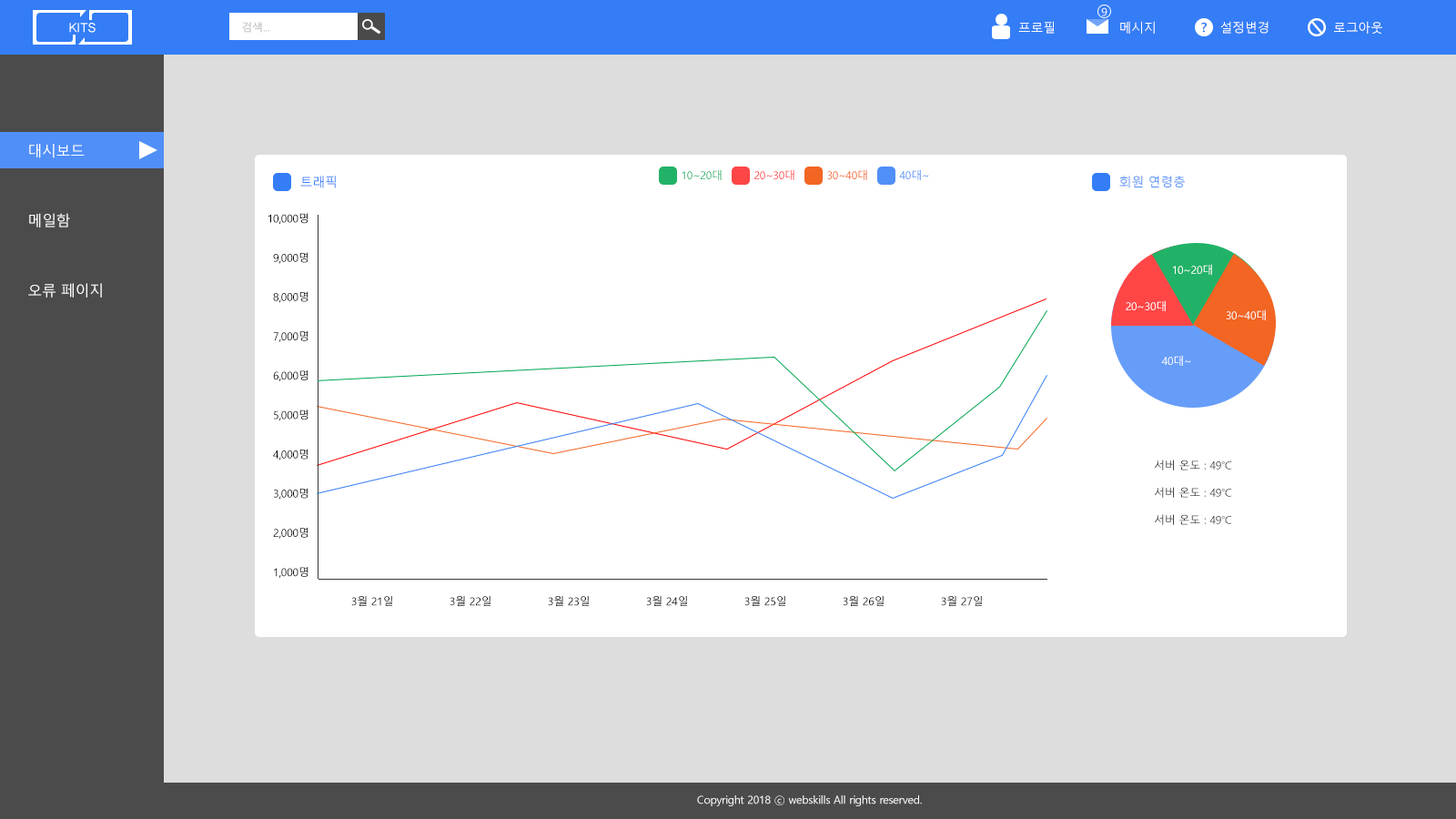
<style>
.page{position:relative;width:1456px;height:819px;background:#ffffff}
.page>*{position:absolute;margin:0}
.t1{font:10.9px "MalgunGothic";letter-spacing:-0.02em;color:#ffffff}
.t2{font:10.9px "MalgunGothic";letter-spacing:-0.02em}
.t3{font:12.7px "MalgunGothic";letter-spacing:-0.02em;color:#ffffff}
.t4{font:12.7px "MalgunGothicBold";letter-spacing:-0.02em;color:#347df6}
.t5{font:14.6px "MalgunGothic";letter-spacing:-0.02em;color:#ffffff}
.t6{font:10.9px "MalgunGothic";letter-spacing:-0.02em;color:#21b268}
.t7{font:10.9px "MalgunGothic";letter-spacing:-0.02em;color:#ff3d3d}
.t8{font:10.9px "MalgunGothic";letter-spacing:-0.02em;color:#f26522}
.t9{font:10.9px "MalgunGothic";letter-spacing:-0.02em;color:#508ff7}
.t10{font:12.7px "MalgunGothic";letter-spacing:-0.02em;color:#347df6}
.t11{font:12.7px "MalgunGothic";letter-spacing:-0.02em;color:#508ff7}
.t12{font:10.9px "MalgunGothic";letter-spacing:-0.02em;color:#000000}
.t13{font:10.9px "MalgunGothic";letter-spacing:-0.02em;color:#424242}
</style>
<div class="page">
<p class="t1" style="left:1101px;top:7px;width:6px;height:9px">9</p>
<p class="t2" style="left:242px;top:22px;width:27px;height:11px">검색...</p>
<p class="t3" style="left:1018px;top:21px;width:364px;height:13px">프로필               메시지               설정변경               로그아웃</p>
<p class="t4" style="left:1201px;top:22px;width:6px;height:11px">?</p>
<p class="t5" style="left:28px;top:144px;width:74px;height:154px">대시보드<br><br><br><br>메일함<br><br><br><br>오류 페이지</p>
<p class="t6" style="left:682px;top:169px;width:40px;height:11px">10~20대</p>
<p class="t7" style="left:754px;top:169px;width:40px;height:11px">20~30대</p>
<p class="t8" style="left:827px;top:169px;width:40px;height:11px">30~40대</p>
<p class="t9" style="left:899px;top:169px;width:30px;height:11px">40대~</p>
<p class="t10" style="left:300px;top:176px;width:36px;height:12px">트래픽</p>
<p class="t11" style="left:1119px;top:176px;width:66px;height:12px">회원 연령층</p>
<p class="t12" style="left:268px;top:213px;width:40px;height:365px;text-align:right">10,000명<br><br><br>9,000명<br><br><br>8,000명<br><br><br>7,000명<br><br><br>6,000명<br><br><br>5,000명<br><br><br>4,000명<br><br><br>3,000명<br><br><br>2,000명<br><br><br>1,000명</p>
<p class="t1" style="left:1173px;top:264px;width:39px;height:11px">10~20대</p>
<p class="t1" style="left:1126px;top:300px;width:40px;height:11px">20~30대</p>
<p class="t1" style="left:1226px;top:309px;width:40px;height:11px">30~40대</p>
<p class="t1" style="left:1161px;top:355px;width:30px;height:11px">40대~</p>
<p class="t13" style="left:1154px;top:460px;width:78px;height:10px">서버 온도 : 49℃</p>
<p class="t13" style="left:1154px;top:487px;width:78px;height:11px">서버 온도 : 49℃</p>
<p class="t13" style="left:1154px;top:514px;width:78px;height:11px">서버 온도 : 49℃</p>
<p class="t12" style="left:351px;top:596px;width:631px;height:10px">3월 21일   3월 22일  3월 23일  3월 24일  3월 25일  3월 26일  3월 27일</p>
<p class="t1" style="left:697px;top:795px;width:225px;height:11px">Copyright 2018 ⓒ webskills All rights reserved.</p>
</div>
